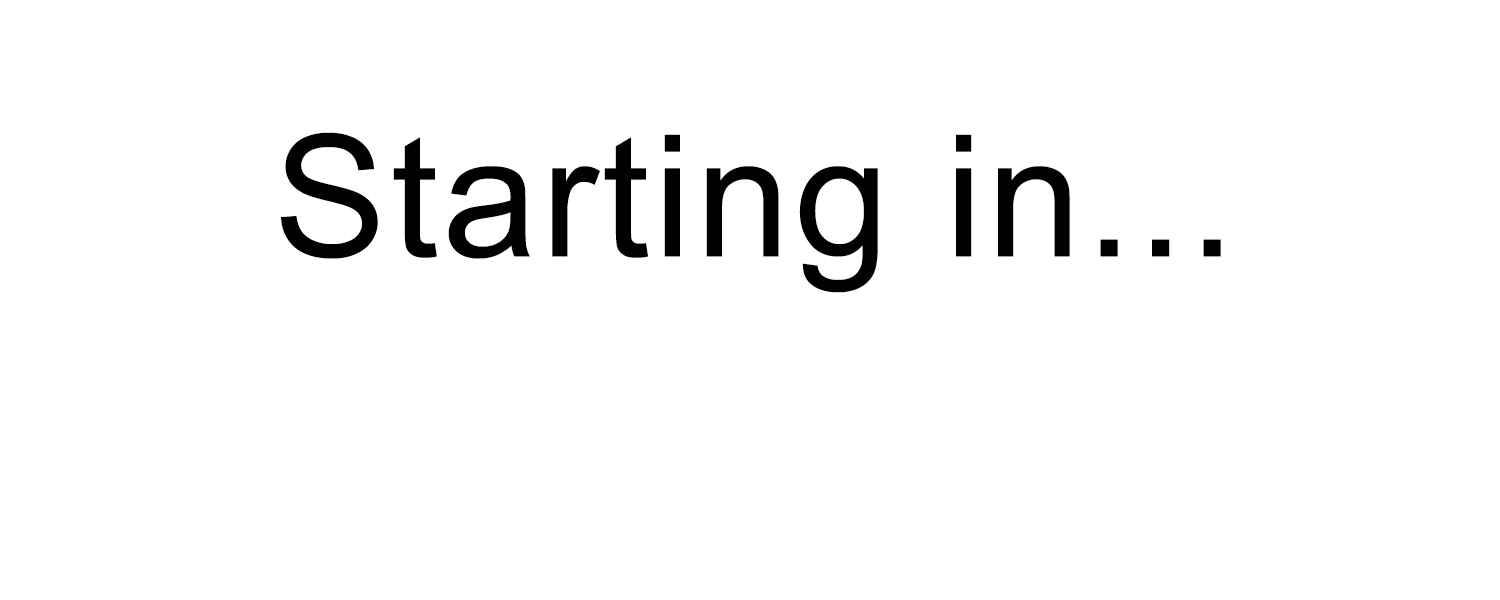
<style>
.page{position:relative;width:1500px;height:600px;background:#ffffff}
.page>*{position:absolute;margin:0}
.t1{font:170px "ArialMT";letter-spacing:0.025em;color:#010101}
</style>
<div class="page">
<p class="t1" style="left:281px;top:132px;width:940px;height:161px">Starting in...</p>
</div>
